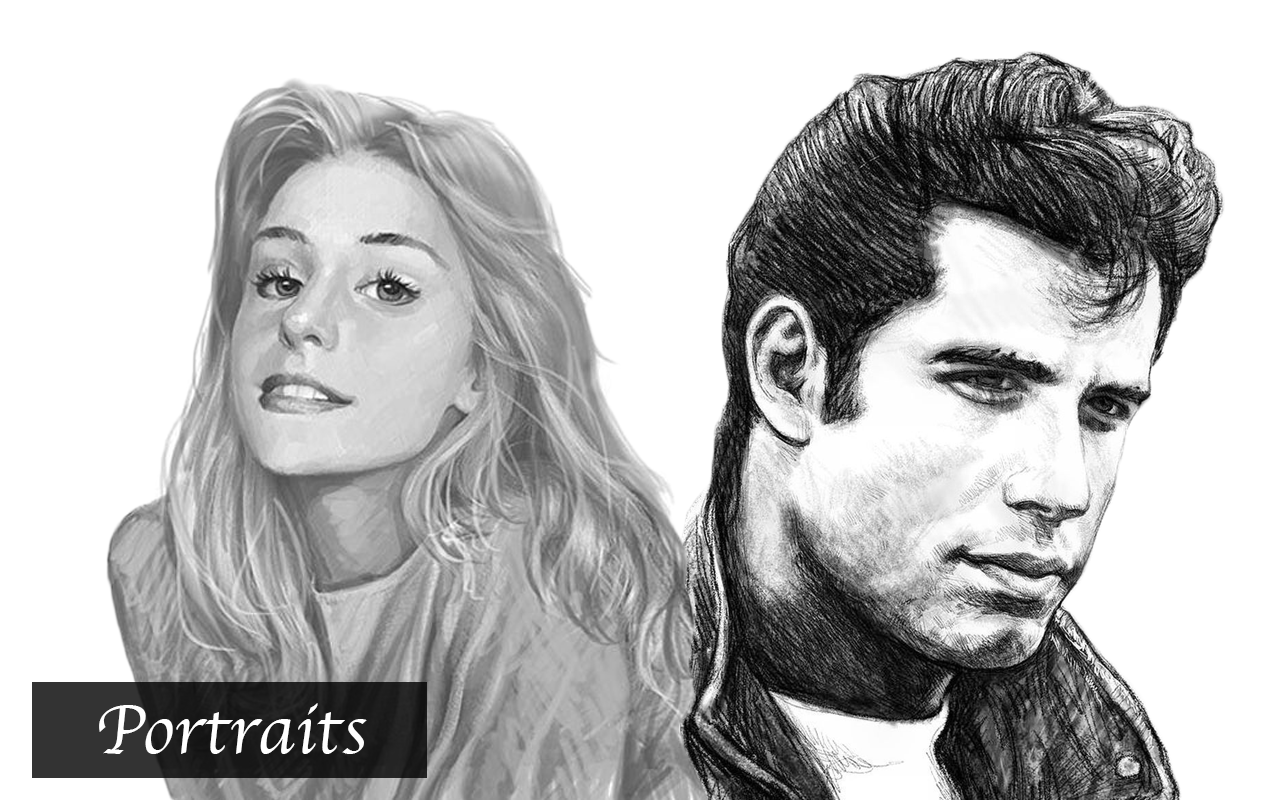
<style>
.page{position:relative;width:1280px;height:800px;background:#ffffff}
.page>*{position:absolute;margin:0}
.t1{font:72px "Apple-Chancery";color:#ffffff}
</style>
<div class="page">
<p class="t1" style="left:99px;top:703px;width:268px;height:51px">Portraits</p>
</div>
